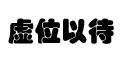
<style>
.page{position:relative;width:120px;height:60px;background:#ffffff}
.page>*{position:absolute;margin:0}
.t1{font:26.7px "STHupo";color:#000000}
</style>
<div class="page">
<p class="t1" style="left:8px;top:18px;width:106px;height:26px">虚位以待</p>
</div>
